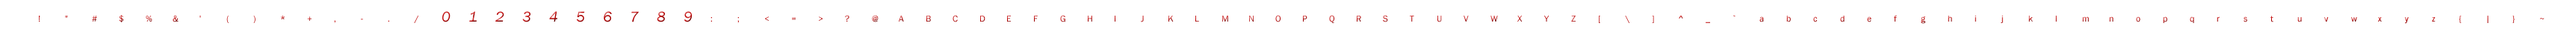
<style>
.page{position:relative;width:2576px;height:32px;background:#ffffff}
.page>*{position:absolute;margin:0}
.t1{font:9px "FranklinGothic-Book"}
.t2{font:14.9px "FranklinGothic-BookItalic"}
</style>
<div class="page">
<p class="t1" style="left:39px;top:11px;width:2506px;height:13px">! " # $ % &amp; ' ( ) * + , - . / <span class="t2">0 1 2 3 4 5 6 7 8 9 </span>: ; &lt; = &gt; ? @ A B C D E F G H I J K L M N O P Q R S T U V W X Y Z [ \ ] ^ _ ` a b c d e f g h i j k l m n o p q r s t u v w x y z { | } ~</p>
</div>
